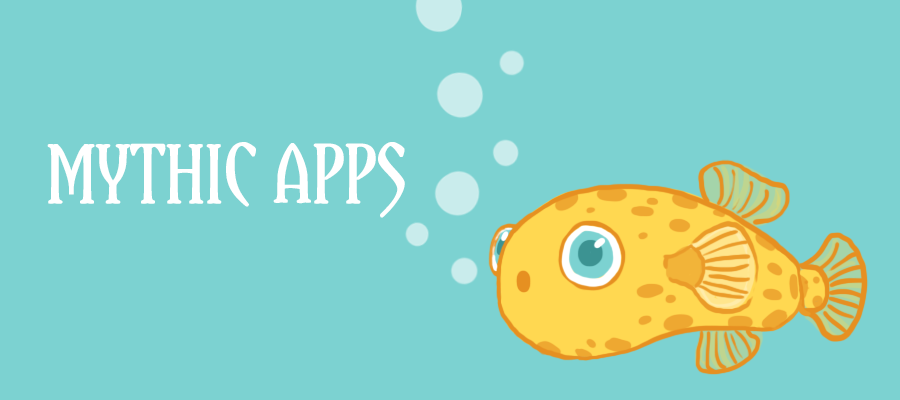
<style>
.page{position:relative;width:900px;height:400px;background:#7cd2d1}
.page>*{position:absolute;margin:0}
.t1{font:61.4px "Yataghan-Regular";color:#ffffff;font-weight:bold}
</style>
<div class="page">
<p class="t1" style="left:47px;top:142px;width:358px;height:76px">MYTHIC APPS</p>
</div>
